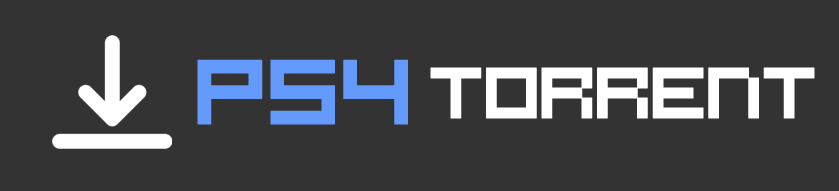
<style>
.page{position:relative;width:839px;height:191px;background:#333333}
.page>*{position:absolute;margin:0}
.t1{font:102px "RSMicro";color:#639afc;font-weight:bold}
.t2{font:80px "RSMicro";letter-spacing:-0.02em;color:#ffffff;font-weight:bold}
</style>
<div class="page">
<p class="t1" style="left:197px;top:59px;width:211px;height:66px">PS4</p>
<p class="t2" style="left:430px;top:67px;width:385px;height:52px">torrent</p>
</div>
